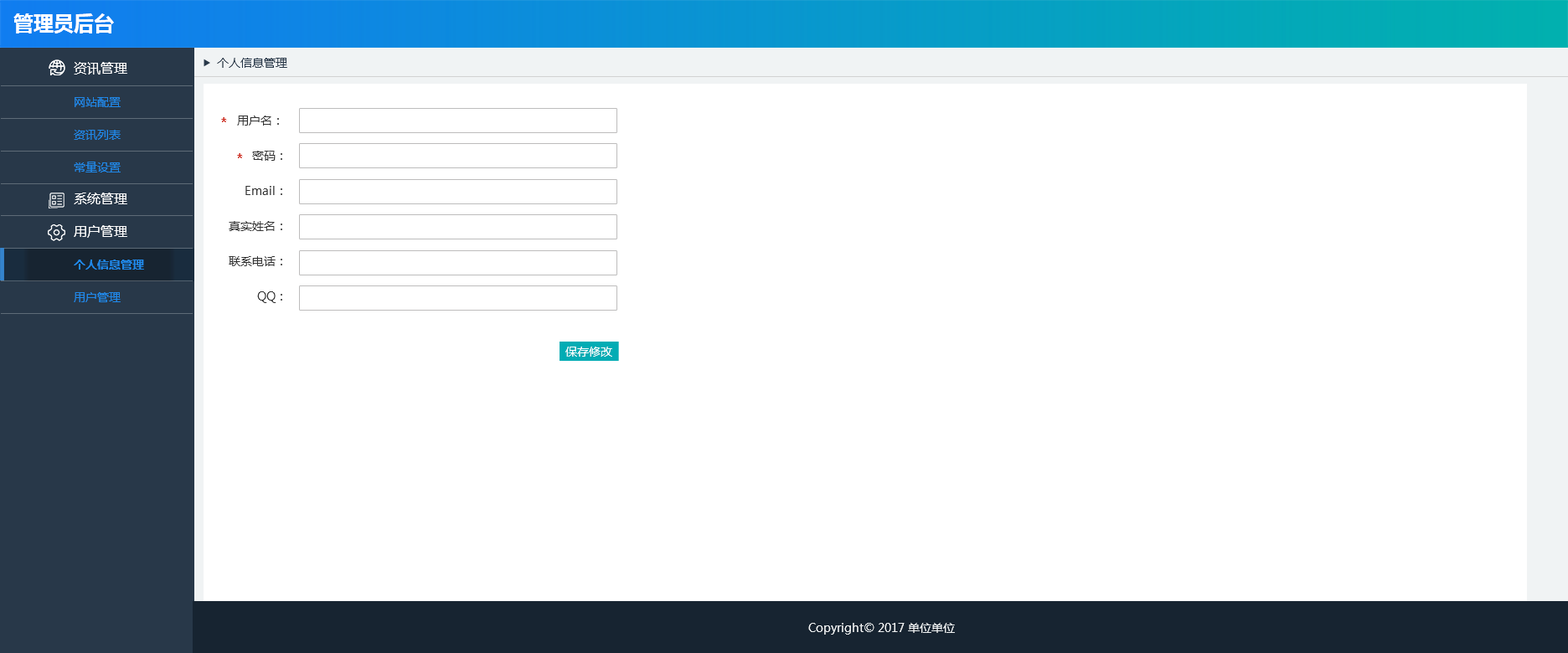
<style>
.page{position:relative;width:1568px;height:653px;background:#ffffff}
.page>*{position:absolute;margin:0}
.t1{font:20.1px "MicrosoftYaHei-Bold";color:#ffffff}
.t2{font:13.4px/32.7px "MicrosoftYaHei";color:#ffffff}
.t3{font:11.7px "MicrosoftYaHei";color:#283849}
.t4{font:11.7px/32.7px "MicrosoftYaHei";color:#2089ea}
.t5{font:11.7px "MicrosoftYaHei-Bold";color:#cc2a1e}
.t6{font:11.7px/35.2px "MicrosoftYaHei";color:#333333}
.t7{font:11.7px/32.7px "MicrosoftYaHei-Bold";color:#2089ea}
.t8{font:11.7px "MicrosoftYaHei";color:#ffffff}
.t9{font:11.7px "MicrosoftYaHei";color:#f0f3f4}
</style>
<div class="page">
<p class="t1" style="left:13px;top:13px;width:101px;height:21px">管理员后台</p>
<p class="t2" style="left:74px;top:62px;width:53px;height:176px">资讯管理<br><br><br><br>系统管理<br>用户管理</p>
<p class="t3" style="left:217px;top:58px;width:70px;height:10px">个人信息管理</p>
<p class="t4" style="left:74px;top:97px;width:47px;height:76px">网站配置<br>资讯列表<br>常量设置</p>
<p class="t5" style="left:221px;top:117px;width:6px;height:5px">*</p>
<p class="t6" style="left:229px;top:116px;width:53px;height:187px;text-align:right">用户名： <br>密码：<br>Email：<br>真实姓名：<br> 联系电话：<br>QQ：</p>
<p class="t5" style="left:237px;top:153px;width:6px;height:5px">*</p>
<p class="t7" style="left:74px;top:260px;width:70px;height:42px">个人信息管理<br><span class="t4">用户管理</span></p>
<p class="t8" style="left:565px;top:347px;width:47px;height:10px">保存修改</p>
<p class="t9" style="left:808px;top:623px;width:147px;height:12px">Copyright© 2017 单位单位</p>
</div>
